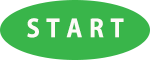
<style>
.page{position:relative;width:150px;height:60px;background:#39b54a}
.page>*{position:absolute;margin:0}
.t1{font:24px "AdobeGothicStd-Bold";letter-spacing:0.28em;color:#fdfbf7}
</style>
<div class="page">
<p class="t1" style="left:27px;top:18px;width:97px;height:20px">START</p>
</div>
